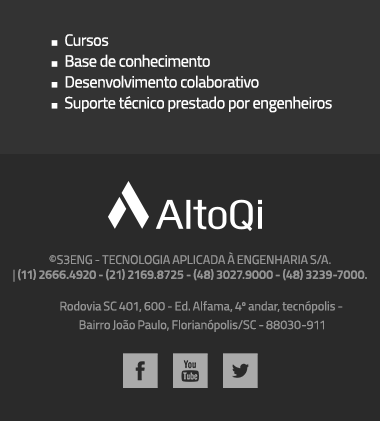
<style>
.page{position:relative;width:380px;height:421px;background:#2a2a2a}
.page>*{position:absolute;margin:0}
.t1{font:16.2px/18.6px "TitilliumWeb-Regular";letter-spacing:-0.025em;color:#ffffff}
.t2{font:11.6px/18.6px "ArialMT";letter-spacing:-0.025em;color:#ffffff}
.t3{font:12.4px "TitilliumWeb-SemiBold";letter-spacing:-0.025em;color:#949494;text-transform:uppercase}
.t4{font:12.4px "TitilliumWeb-Regular";letter-spacing:-0.025em;color:#949494;text-transform:uppercase}
.t5{font:12.4px/16.6px "TitilliumWeb-Regular";letter-spacing:-0.025em;color:#949494}
</style>
<div class="page">
<p class="t1" style="left:51px;top:34px;width:281px;height:79px"><span class="t2">■   </span>Cursos       <br><span class="t2">■   </span>Base de conhecimento       <br><span class="t2">■   </span>Desenvolvimento colaborativo      <br><span class="t2">■   </span>Suporte técnico prestado por engenheiros</p>
<p class="t3" style="left:13px;top:252px;width:354px;height:30px;text-align:center"><span class="t4">©S3ENG - TECNOLOGIA APLICADA À ENGENHARIA S/A.<br> | </span>(11) 2666.4920 - (21) 2169.8725 - (48) 3027.9000 - (48) 3239-7000.</p>
<p class="t5" style="left:60px;top:301px;width:283px;height:31px;text-align:center">Rodovia SC 401, 600 - Ed. Alfama, 4º andar, tecnópolis - <br>Bairro João Paulo, Florianópolis/SC - 88030-911</p>
</div>
